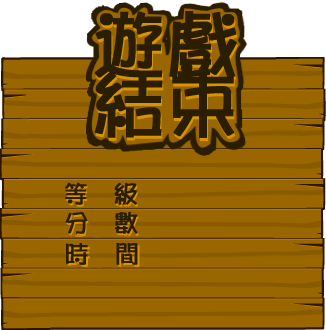
<style>
.page{position:relative;width:326px;height:330px;background:#996600}
.page>*{position:absolute;margin:0}
.t1{font:72px/60px "Pop2EG-Bold-T-GB";color:#2b1d00;font-weight:bold}
.t2{font:24px "Pop2EG-Bold-T-GB";color:#2b1d00;font-weight:bold}
</style>
<div class="page">
<p class="t1" style="left:94px;top:11px;width:143px;height:127px">游戏<br>结束</p>
<p class="t2" style="left:65px;top:182px;width:72px;height:23px">等  级</p>
<p class="t2" style="left:65px;top:212px;width:73px;height:22px">分  数</p>
<p class="t2" style="left:66px;top:243px;width:72px;height:22px">时  间</p>
</div>
